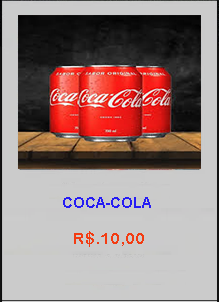
<style>
.page{position:relative;width:219px;height:302px;background:#cbcbcb}
.page>*{position:absolute;margin:0}
.t1{font:14.7px "Arial-BoldMT";color:#261cf4}
.t2{font:16px "ArialRoundedMTBold";color:#f33c12}
</style>
<div class="page">
<p class="t1" style="left:63px;top:197px;width:88px;height:11px">COCA-COLA</p>
<p class="t2" style="left:74px;top:231px;width:70px;height:16px">R$.10,00</p>
</div>
